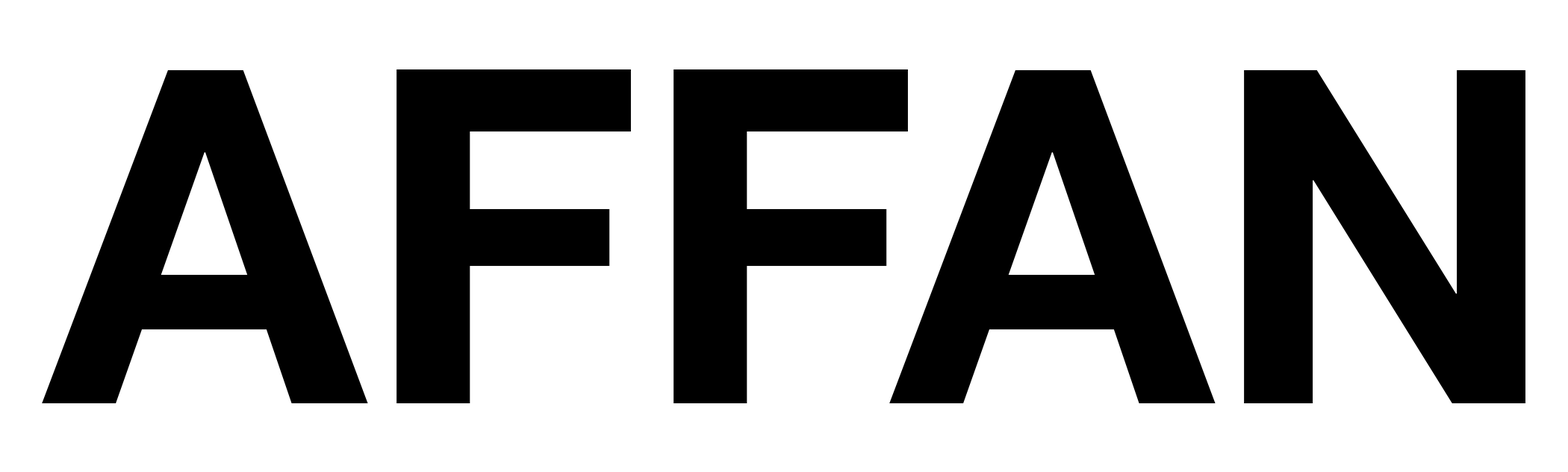
<style>
.page{position:relative;width:1568px;height:472px;background:#ffffff}
.page>*{position:absolute;margin:0}
.t1{font:466.7px "HelveticaNeue-Bold";color:#000000}
</style>
<div class="page">
<p class="t1" style="left:42px;top:69px;width:1483px;height:334px">AFFAN</p>
</div>
